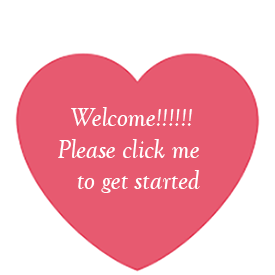
<style>
.page{position:relative;width:275px;height:275px;background:#ffffff}
.page>*{position:absolute;margin:0}
.t1{font:27.1px/31.6px "GoudyOldStyleT-Italic";color:#ffffff}
</style>
<div class="page">
<p class="t1" style="left:58px;top:107px;width:142px;height:86px;text-align:right">Welcome!!!!!! <br>Please click me<br>to get started</p>
</div>
